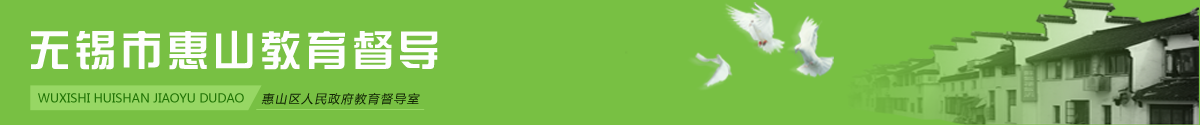
<style>
.page{position:relative;width:1200px;height:125px;background:#78c043}
.page>*{position:absolute;margin:0}
.t1{font:42px "JHRuHeiZhong";letter-spacing:0.1em;color:#fefefe;text-transform:uppercase}
.t2{font:12px "MicrosoftYaHei";color:#217405;text-transform:uppercase}
.t3{font:12px "MicrosoftYaHei";letter-spacing:0.1em;color:#102203;font-style:italic}
</style>
<div class="page">
<p class="t1" style="left:31px;top:30px;width:407px;height:40px">无锡市惠山教育督导</p>
<p class="t2" style="left:38px;top:93px;width:206px;height:10px">Wuxishi Huishan Jiaoyu Dudao</p>
<p class="t3" style="left:261px;top:93px;width:159px;height:12px">惠山区人民政府教育督导室</p>
</div>
